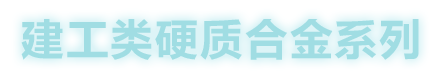
<style>
.page{position:relative;width:441px;height:81px;background:#ffffff}
.page>*{position:absolute;margin:0}
.t1{font:44.8px "FZLTCHJW--GB1-0";color:#a0dde3;text-transform:uppercase}
</style>
<div class="page">
<p class="t1" style="left:21px;top:19px;width:398px;height:41px">建工类硬质合金系列</p>
</div>
